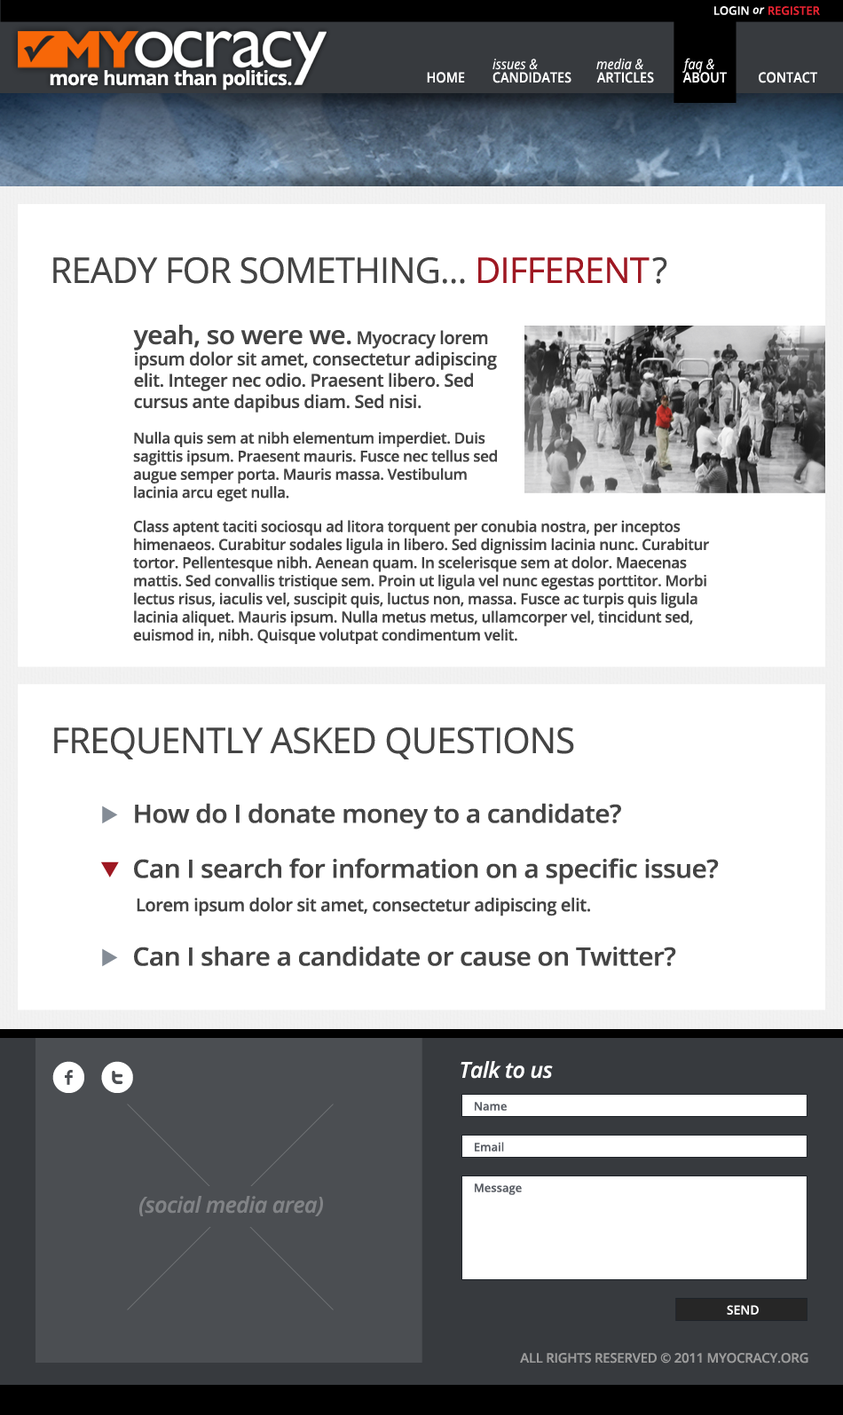
<style>
.page{position:relative;width:843px;height:1415px;background:#ffffff}
.page>*{position:absolute;margin:0}
.t1{font:11.5px "OpenSans-Semibold";color:#ffffff;text-transform:uppercase}
.t2{font:11.5px "OpenSans-SemiboldItalic";color:#ffffff}
.t3{font:11.5px "OpenSans-Semibold";color:#ec2432;text-transform:uppercase}
.t4{font:14.2px "OpenSans-Italic";color:#ffffff;scale:0.9 1}
.t5{font:19.7px "OpenSans-Bold";letter-spacing:-0.02em;color:#ffffff}
.t6{font:14.2px "OpenSans-Semibold";color:#ffffff;text-transform:uppercase;scale:0.9 1}
.t7{font:35.5px "OpenSans";letter-spacing:-0.02em;color:#444444;text-transform:uppercase}
.t8{font:35.5px "OpenSans";letter-spacing:-0.02em;color:#9e1822;text-transform:uppercase}
.t9{font:17.7px "OpenSans-Semibold";letter-spacing:-0.02em;color:#444444}
.t10{font:25.3px "OpenSans-Semibold";letter-spacing:-0.02em;color:#444444;scale:1.05 1}
.t11{font:15.1px "OpenSans-Semibold";letter-spacing:-0.02em;color:#444444}
.t12{font:44.4px "Socialico";letter-spacing:0.3em;color:#ffffff}
.t13{font:22.2px "OpenSans-SemiboldItalic";letter-spacing:-0.02em;color:#ffffff}
.t14{font:11.5px "OpenSans-Semibold";color:#5a5e65}
.t15{font:22.2px "OpenSans-SemiboldItalic";letter-spacing:-0.02em;color:#818386}
.t16{font:12.4px "OpenSans-Semibold";color:#ffffff}
.t17{font:13.3px "OpenSans-Semibold";letter-spacing:-0.02em;color:#9c9c9c;text-transform:uppercase}
</style>
<div class="page">
<p class="t1" style="left:714px;top:6px;width:51px;height:9px">Login <span class="t2">or</span></p>
<p class="t3" style="left:768px;top:6px;width:52px;height:9px">Register</p>
<p class="t4" style="left:492px;top:59px;width:46px;height:11px">issues &amp;</p>
<p class="t4" style="left:596px;top:58px;width:47px;height:12px">media &amp;</p>
<p class="t4" style="left:682px;top:58px;width:32px;height:15px">faq &amp;</p>
<p class="t5" style="left:50px;top:70px;width:242px;height:20px">more human than politics.</p>
<p class="t6" style="left:427px;top:72px;width:38px;height:11px">home</p>
<p class="t6" style="left:492px;top:72px;width:79px;height:11px">candidates</p>
<p class="t6" style="left:596px;top:72px;width:58px;height:11px">articles</p>
<p class="t6" style="left:682px;top:72px;width:45px;height:11px">ABOUT</p>
<p class="t6" style="left:758px;top:72px;width:59px;height:11px">contact</p>
<p class="t7" style="left:53px;top:257px;width:614px;height:27px">ready for something... <span class="t8">different</span>?</p>
<p class="t9" style="left:133px;top:325px;width:364px;height:88px"><span class="t10">yeah, so were we.</span> Myocracy lorem ipsum dolor sit amet, consectetur adipiscing elit. Integer nec odio. Praesent libero. Sed cursus ante dapibus diam. Sed nisi.</p>
<p class="t11" style="left:133px;top:431px;width:577px;height:213px">Nulla quis sem at nibh elementum imperdiet. Duis sagittis ipsum. Praesent mauris. Fusce nec tellus sed augue semper porta. Mauris massa. Vestibulum lacinia arcu eget nulla.<br>Class aptent taciti sociosqu ad litora torquent per conubia nostra, per inceptos himenaeos. Curabitur sodales ligula in libero. Sed dignissim lacinia nunc. Curabitur tortor. Pellentesque nibh. Aenean quam. In scelerisque sem at dolor. Maecenas mattis. Sed convallis tristique sem. Proin ut ligula vel nunc egestas porttitor. Morbi lectus risus, iaculis vel, suscipit quis, luctus non, massa. Fusce ac turpis quis ligula lacinia aliquet. Mauris ipsum. Nulla metus metus, ullamcorper vel, tincidunt sed, euismod in, nibh. Quisque volutpat condimentum velit.</p>
<p class="t7" style="left:54px;top:727px;width:520px;height:32px">frequently asked questions</p>
<p class="t10" style="left:135px;top:803px;width:486px;height:26px">How do I donate money to a candidate?</p>
<p class="t10" style="left:134px;top:858px;width:585px;height:26px">Can I search for information on a specific issue?</p>
<p class="t9" style="left:137px;top:897px;width:453px;height:19px">Lorem ipsum dolor sit amet, consectetur adipiscing elit.</p>
<p class="t10" style="left:134px;top:946px;width:542px;height:20px">Can I share a candidate or cause on Twitter?</p>
<p class="t12" style="left:52px;top:1061px;width:81px;height:32px">ft</p>
<p class="t13" style="left:460px;top:1061px;width:93px;height:18px">Talk to us</p>
<p class="t14" style="left:475px;top:1102px;width:32px;height:9px">Name</p>
<p class="t14" style="left:475px;top:1142px;width:29px;height:9px">Email</p>
<p class="t14" style="left:475px;top:1183px;width:47px;height:12px">Message</p>
<p class="t15" style="left:139px;top:1196px;width:184px;height:20px">(social media area)</p>
<p class="t16" style="left:727px;top:1305px;width:31px;height:10px">SEND</p>
<p class="t17" style="left:520px;top:1353px;width:288px;height:10px">all rights reserved © 2011 myocracy.org</p>
</div>
